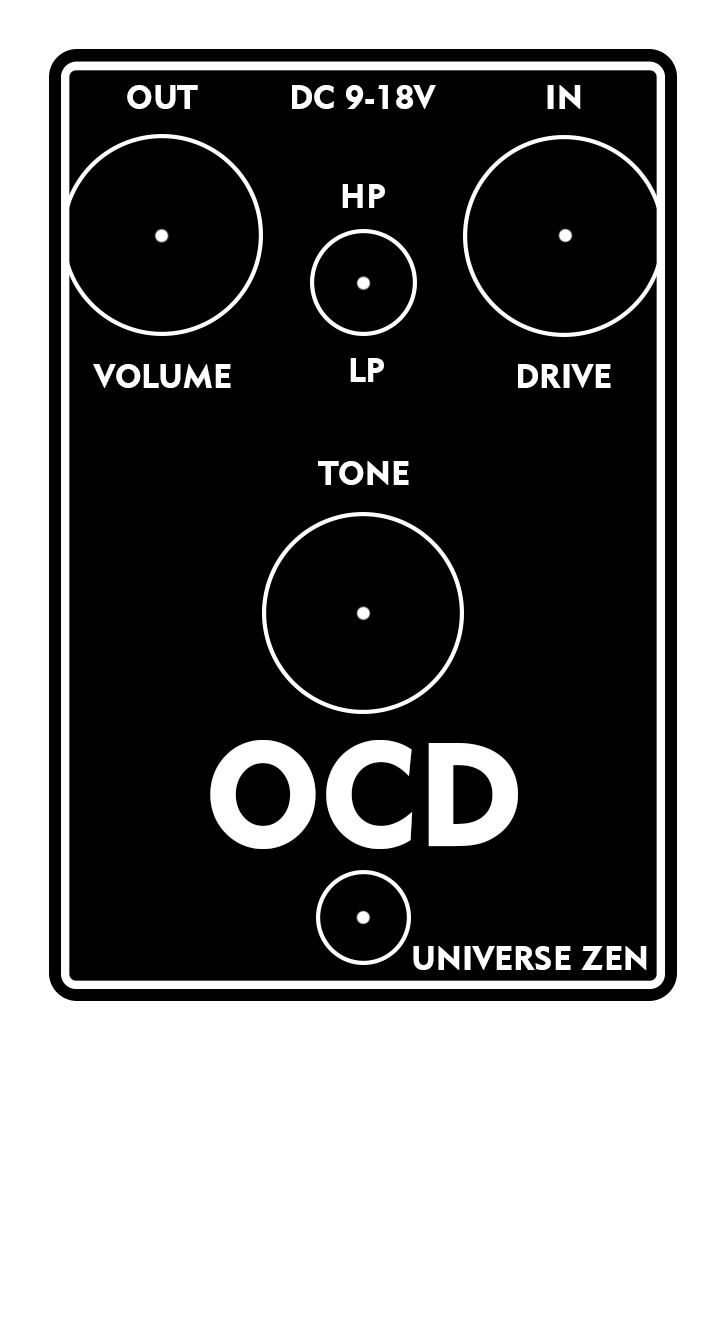
<style>
.page{position:relative;width:726px;height:1323px;background:#000000}
.page>*{position:absolute;margin:0}
.t1{font:33.3px "Geometric415BT-BlackA";color:#ffffff}
.t2{font:145.6px "Geometric415BT-BlackA";color:#ffffff}
</style>
<div class="page">
<p class="t1" style="left:127px;top:85px;width:71px;height:24px">OUT</p>
<p class="t1" style="left:292px;top:85px;width:144px;height:24px">DC 9-18V</p>
<p class="t1" style="left:547px;top:85px;width:34px;height:24px">IN</p>
<p class="t1" style="left:342px;top:184px;width:43px;height:24px">HP</p>
<p class="t1" style="left:93px;top:364px;width:138px;height:24px">VOLUME</p>
<p class="t1" style="left:350px;top:358px;width:34px;height:24px">LP</p>
<p class="t1" style="left:518px;top:364px;width:93px;height:24px">DRIVE</p>
<p class="t1" style="left:318px;top:461px;width:91px;height:24px">TONE</p>
<p class="t2" style="left:210px;top:740px;width:308px;height:109px">OCD</p>
<p class="t1" style="left:413px;top:946px;width:234px;height:24px">UNIVERSE ZEN</p>
</div>
